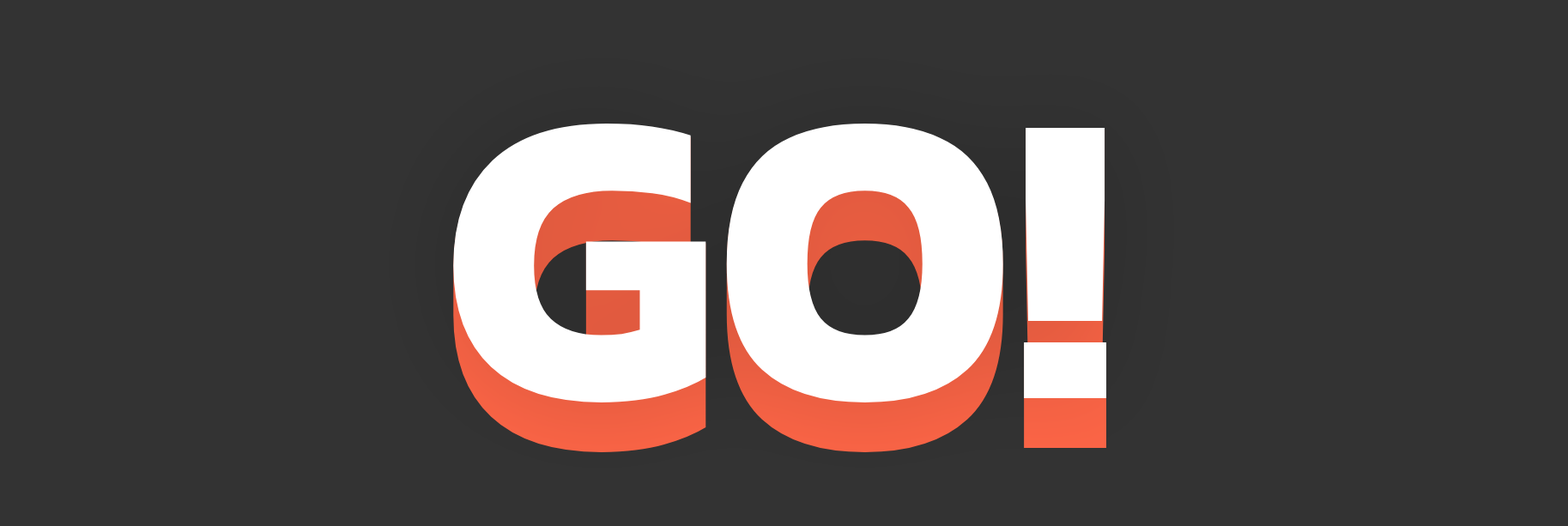
<style>
.page{position:relative;width:1568px;height:526px;background:#333333}
.page>*{position:absolute;margin:0}
.t1{font:419.9px "Kanit-Bold";color:#ffffff}
</style>
<div class="page">
<p class="t1" style="left:453px;top:124px;width:654px;height:279px">GO!</p>
</div>
